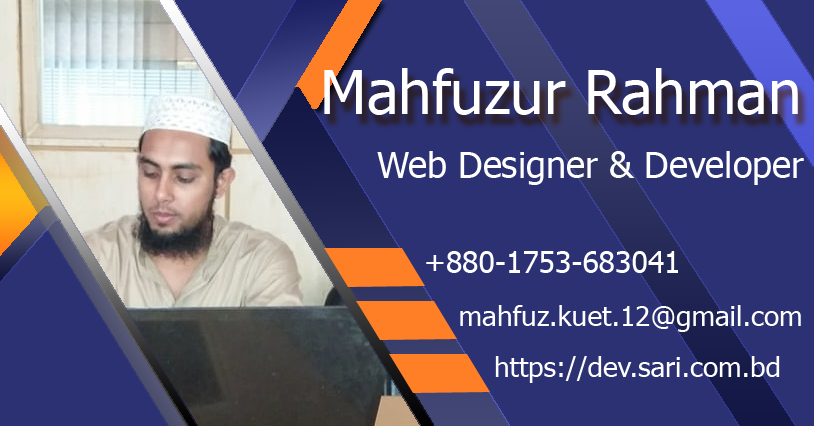
<style>
.page{position:relative;width:814px;height:426px;background:#2b3172}
.page>*{position:absolute;margin:0}
.t1{font:60px "Tahoma";color:#ffffff}
.t2{font:36px "Tahoma";color:#ffffff}
.t3{font:30px "Tahoma";color:#ffffff}
.t4{font:28px "Tahoma";color:#ffffff}
</style>
<div class="page">
<p class="t1" style="left:324px;top:68px;width:474px;height:47px">Mahfuzur Rahman</p>
<p class="t2" style="left:377px;top:151px;width:427px;height:34px">Web Designer &amp; Developer</p>
<p class="t3" style="left:426px;top:251px;width:252px;height:22px">+880-1753-683041</p>
<p class="t4" style="left:460px;top:305px;width:341px;height:27px">mahfuz.kuet.12@gmail.com</p>
<p class="t4" style="left:495px;top:356px;width:285px;height:27px">https://dev.sari.com.bd</p>
</div>
